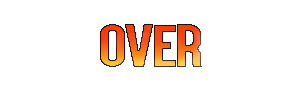
<style>
.page{position:relative;width:300px;height:100px;background:#ffffff}
.page>*{position:absolute;margin:0}
.t1{font:50px "Aku&Kamu";letter-spacing:-0.05em;scale:1.33 1}
</style>
<div class="page">
<p class="t1" style="left:100px;top:24px;width:102px;height:43px">over</p>
</div>
